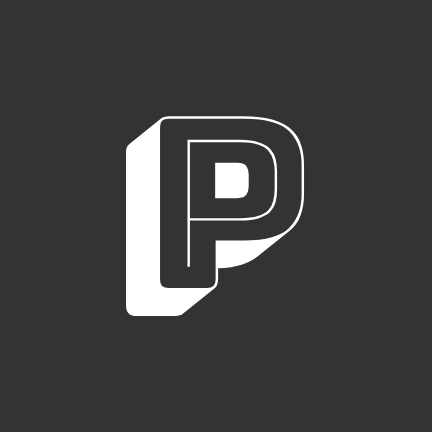
<style>
.page{position:relative;width:432px;height:432px;background:#333333}
.page>*{position:absolute;margin:0}
.t1{font:235.2px "BungeeShade-Regular";color:#ffffff;scale:1.04 1}
</style>
<div class="page">
<p class="t1" style="left:126px;top:116px;width:179px;height:200px">P</p>
</div>
